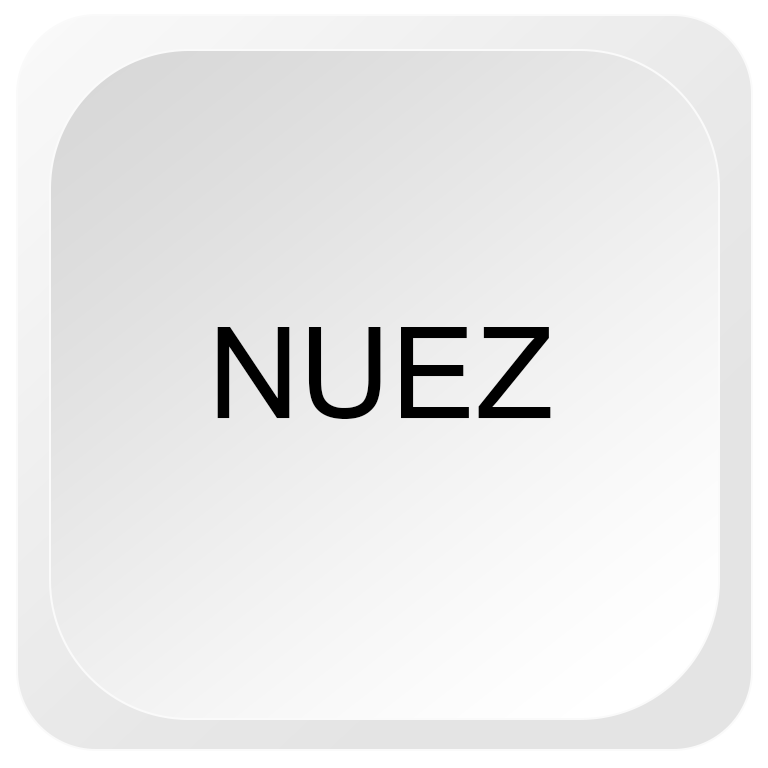
<style>
.page{position:relative;width:768px;height:768px}
.page>*{position:absolute;margin:0}
.t1{font:127px "ArialMT";color:#000000}
</style>
<div class="page">
<p class="t1" style="left:217px;top:327px;width:334px;height:92px">NUEZ</p>
</div>
